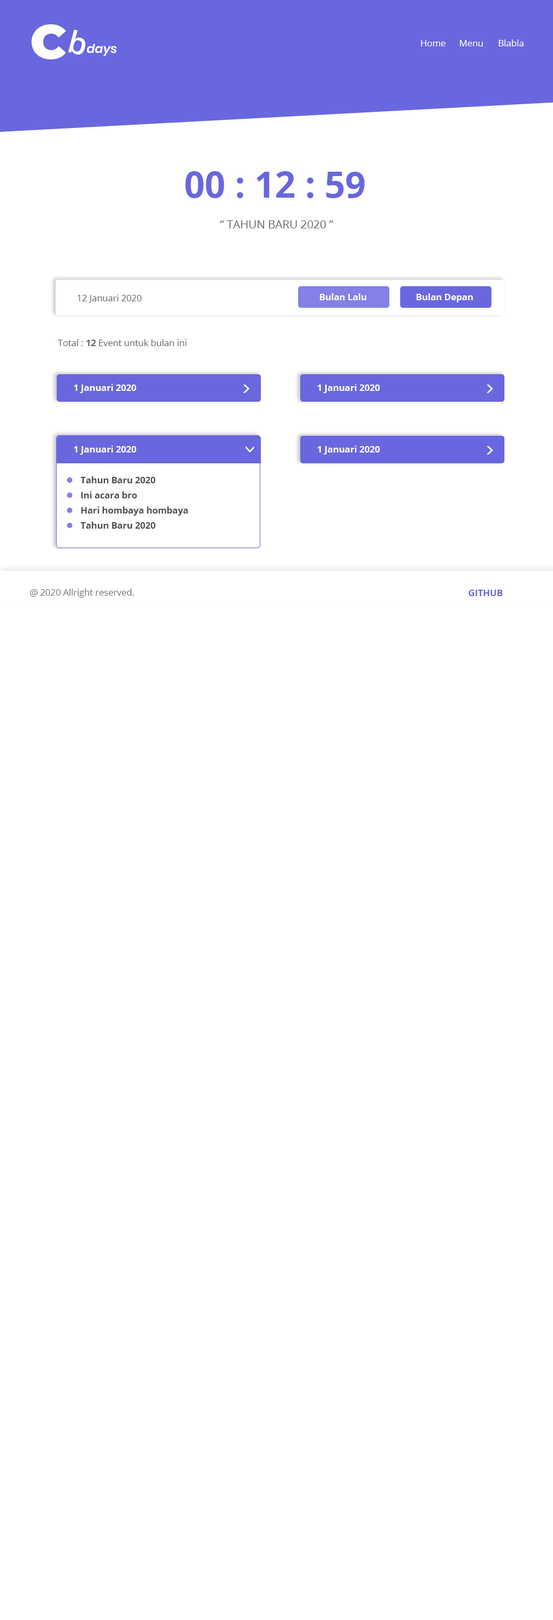
<style>
.page{position:relative;width:553px;height:1620px;background:#ffffff}
.page>*{position:absolute;margin:0}
.t1{font:48.7px "Montserrat-Black";color:#ffffff}
.t2{font:30.4px "OpenSans-SemiBold";color:#ffffff}
.t3{font:9px "OpenSans-Regular";color:#ffffff}
.t4{font:12.2px "Poppins-SemiBoldItalic";color:#ffffff}
.t5{font:36px "OpenSans-Bold";color:#6967de}
.t6{font:11.3px "OpenSans-Regular";color:#686464}
.t7{font:9px "OpenSans-Bold";color:#ffffff}
.t8{font:9px "OpenSans-Regular";color:#686464}
.t9{font:9px "OpenSans-Bold";color:#686464}
.t10{font:18px "Poppins-Regular";color:#ffffff}
.t11{font:9px "OpenSans-Bold";color:#4e4c4c}
.t12{font:9px "OpenSans-Regular";color:#747475}
.t13{font:9px "OpenSans-Bold";color:#6967de}
</style>
<div class="page">
<p class="t1" style="left:31px;top:24px;width:35px;height:35px">C</p>
<p class="t2" style="left:68px;top:29px;width:17px;height:26px;rotate:15deg">b</p>
<p class="t3" style="left:421px;top:39px;width:103px;height:7px">Home Menu Blabla</p>
<p class="t4" style="left:87px;top:44px;width:30px;height:12px">days</p>
<p class="t5" style="left:185px;top:171px;width:180px;height:27px">00 : 12 : 59</p>
<p class="t6" style="left:220px;top:220px;width:113px;height:8px">“ TAHUN BARU 2020 ”</p>
<p class="t7" style="left:320px;top:293px;width:47px;height:7px">Bulan Lalu</p>
<p class="t7" style="left:416px;top:293px;width:57px;height:9px">Bulan Depan</p>
<p class="t8" style="left:77px;top:294px;width:64px;height:9px">12 Januari 2020</p>
<p class="t8" style="left:58px;top:339px;width:128px;height:7px">Total : <span class="t9">12</span> Event untuk bulan ini</p>
<p class="t7" style="left:74px;top:384px;width:63px;height:9px">1 Januari 2020</p>
<p class="t10" style="left:243px;top:384px;width:6px;height:9px">&gt;</p>
<p class="t7" style="left:318px;top:384px;width:62px;height:9px">1 Januari 2020</p>
<p class="t10" style="left:487px;top:384px;width:6px;height:9px">&gt;</p>
<p class="t7" style="left:74px;top:446px;width:63px;height:9px">1 Januari 2020</p>
<p class="t10" style="left:246px;top:446px;width:8px;height:7px;rotate:90deg">&gt;</p>
<p class="t7" style="left:318px;top:446px;width:62px;height:9px">1 Januari 2020</p>
<p class="t10" style="left:487px;top:446px;width:6px;height:9px">&gt;</p>
<p class="t11" style="left:80px;top:476px;width:76px;height:7px">Tahun Baru 2020</p>
<p class="t11" style="left:81px;top:491px;width:56px;height:7px">Ini acara bro</p>
<p class="t11" style="left:81px;top:507px;width:107px;height:9px">Hari hombaya hombaya</p>
<p class="t11" style="left:80px;top:522px;width:76px;height:7px">Tahun Baru 2020</p>
<p class="t12" style="left:30px;top:589px;width:104px;height:9px">@ 2020 Allright reserved.</p>
<p class="t13" style="left:469px;top:590px;width:34px;height:6px">GITHUB</p>
</div>
